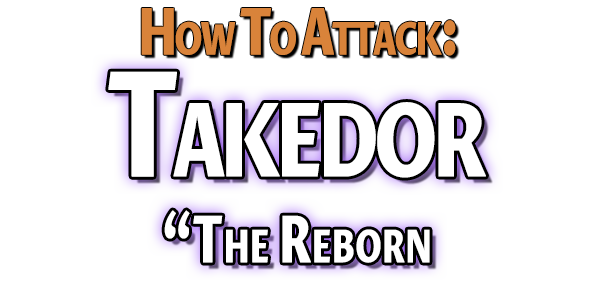
<style>
.page{position:relative;width:603px;height:304px;background:#ffffff}
.page>*{position:absolute;margin:0}
.t1{font:64.4px "ProzaLibre-ExtraBold";letter-spacing:-0.095em;color:#d9843a;font-variant:small-caps;font-weight:bold;scale:0.74 1}
.t2{font:64.4px/86px "ProzaLibre-ExtraBold";letter-spacing:-0.015em;color:#ffffff;font-variant:small-caps;font-weight:bold;scale:0.69 1}
.t3{font:145px/86px "ProzaLibre-ExtraBold";letter-spacing:-0.095em;color:#ffffff;font-variant:small-caps;font-weight:bold;scale:0.74 1}
</style>
<div class="page">
<p class="t1" style="left:141px;top:8px;width:315px;height:48px">How To Attack:</p>
<p class="t2" style="left:108px;top:71px;width:378px;height:192px;text-align:center"><span class="t3">Takedor<br></span>“The Reborn</p>
</div>
